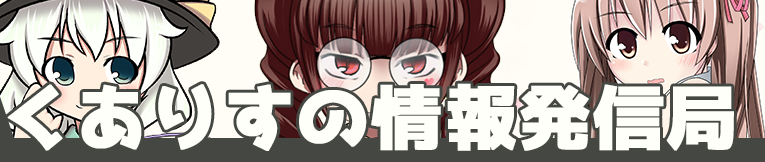
<style>
.page{position:relative;width:765px;height:162px;background:#fefff9}
.page>*{position:absolute;margin:0}
.t1{font:72px "07LightNovelPOP";color:#fefff9;font-weight:bold}
</style>
<div class="page">
<p class="t1" style="left:7px;top:83px;width:727px;height:68px">くありすの情報発信局</p>
</div>
